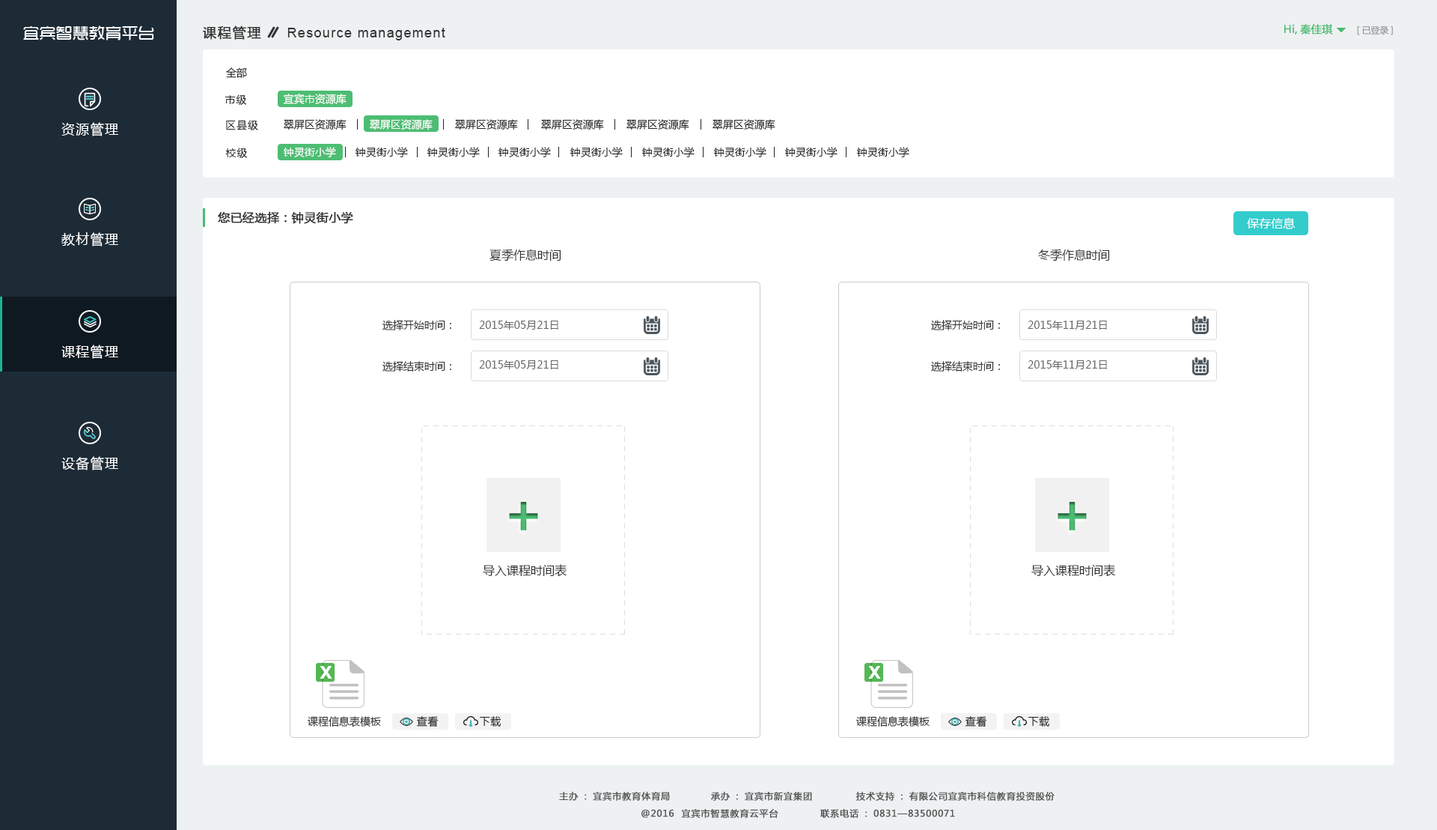
<style>
.page{position:relative;width:1437px;height:830px;background:#ffffff}
.page>*{position:absolute;margin:0}
.t1{font:16.5px "TRENDS";color:#ffffff}
.t2{font:13.5px "MicrosoftYaHei";letter-spacing:0.075em;color:#333333;font-weight:bold}
.t3{font:13.5px "ArialMT";letter-spacing:0.075em;color:#333333}
.t4{font:10.5px "MicrosoftYaHei";color:#4dbd73;font-weight:bold}
.t5{font:9px "MicrosoftYaHei";letter-spacing:-0.01em;color:#868686}
.t6{font:10.5px "MicrosoftYaHei";color:#222222}
.t7{font:10.5px "MicrosoftYaHei";letter-spacing:0.075em;color:#222222}
.t8{font:10.5px "MicrosoftYaHei";color:#ffffff}
.t9{font:13.5px "MicrosoftYaHei";letter-spacing:0.075em;color:#ffffff}
.t10{font:12px "MicrosoftYaHei";color:#333333;font-weight:bold}
.t11{font:12px "MicrosoftYaHei";color:#ffffff}
.t12{font:12px "MicrosoftYaHei";color:#333333}
.t13{font:10.5px "MicrosoftYaHei";color:#333333}
.t14{font:10.5px "MicrosoftYaHei";color:#666666}
.t15{font:10.5px "MicrosoftYaHei";letter-spacing:0.05em;color:#222222}
.t16{font:9px "MicrosoftYaHei";letter-spacing:0.05em;color:#545454;font-weight:bold}
</style>
<div class="page">
<p class="t1" style="left:23px;top:25px;width:131px;height:15px">宜宾智慧教育平台</p>
<p class="t2" style="left:203px;top:25px;width:58px;height:15px">课程管理</p>
<p class="t3" style="left:287px;top:28px;width:158px;height:12px">Resource management</p>
<p class="t4" style="left:1285px;top:24px;width:48px;height:10px">Hi,秦佳琪</p>
<p class="t5" style="left:1357px;top:25px;width:36px;height:10px">[已登录]</p>
<p class="t6" style="left:226px;top:67px;width:21px;height:11px">全部</p>
<p class="t7" style="left:225px;top:94px;width:22px;height:11px">市级</p>
<p class="t8" style="left:283px;top:94px;width:64px;height:11px">宜宾市资源库</p>
<p class="t9" style="left:61px;top:122px;width:57px;height:14px">资源管理</p>
<p class="t7" style="left:226px;top:120px;width:32px;height:10px">区县级</p>
<p class="t6" style="left:284px;top:119px;width:63px;height:11px">翠屏区资源库</p>
<p class="t8" style="left:370px;top:119px;width:63px;height:11px">翠屏区资源库</p>
<p class="t6" style="left:455px;top:119px;width:63px;height:11px">翠屏区资源库</p>
<p class="t6" style="left:541px;top:119px;width:63px;height:11px">翠屏区资源库</p>
<p class="t6" style="left:627px;top:119px;width:63px;height:11px">翠屏区资源库</p>
<p class="t6" style="left:713px;top:119px;width:63px;height:11px">翠屏区资源库</p>
<p class="t7" style="left:225px;top:147px;width:23px;height:11px">校级</p>
<p class="t8" style="left:283px;top:147px;width:53px;height:10px">钟灵街小学</p>
<p class="t6" style="left:355px;top:147px;width:53px;height:10px">钟灵街小学</p>
<p class="t6" style="left:427px;top:147px;width:53px;height:10px">钟灵街小学</p>
<p class="t6" style="left:498px;top:147px;width:53px;height:10px">钟灵街小学</p>
<p class="t6" style="left:570px;top:147px;width:53px;height:10px">钟灵街小学</p>
<p class="t6" style="left:642px;top:147px;width:53px;height:10px">钟灵街小学</p>
<p class="t6" style="left:713px;top:147px;width:54px;height:10px">钟灵街小学</p>
<p class="t6" style="left:785px;top:147px;width:53px;height:10px">钟灵街小学</p>
<p class="t6" style="left:856px;top:147px;width:54px;height:10px">钟灵街小学</p>
<p class="t10" style="left:218px;top:211px;width:135px;height:13px">您已经选择：钟灵街小学</p>
<p class="t11" style="left:1247px;top:217px;width:49px;height:12px">保存信息</p>
<p class="t9" style="left:61px;top:232px;width:57px;height:14px">教材管理</p>
<p class="t12" style="left:490px;top:249px;width:72px;height:12px">夏季作息时间</p>
<p class="t12" style="left:1038px;top:249px;width:72px;height:12px">冬季作息时间</p>
<p class="t13" style="left:383px;top:320px;width:68px;height:10px">选择开始时间：</p>
<p class="t14" style="left:479px;top:320px;width:80px;height:9px">2015年05月21日</p>
<p class="t13" style="left:931px;top:320px;width:69px;height:10px">选择开始时间：</p>
<p class="t14" style="left:1028px;top:320px;width:79px;height:9px">2015年11月21日</p>
<p class="t9" style="left:61px;top:344px;width:57px;height:15px">课程管理</p>
<p class="t13" style="left:383px;top:361px;width:68px;height:10px">选择结束时间：</p>
<p class="t14" style="left:479px;top:360px;width:80px;height:9px">2015年05月21日</p>
<p class="t13" style="left:931px;top:361px;width:69px;height:10px">选择结束时间：</p>
<p class="t14" style="left:1028px;top:360px;width:79px;height:9px">2015年11月21日</p>
<p class="t9" style="left:61px;top:456px;width:57px;height:14px">设备管理</p>
<p class="t12" style="left:483px;top:564px;width:84px;height:12px">导入课程时间表</p>
<p class="t12" style="left:1032px;top:564px;width:84px;height:12px">导入课程时间表</p>
<p class="t13" style="left:308px;top:716px;width:73px;height:11px">课程信息表模板</p>
<p class="t15" style="left:417px;top:716px;width:22px;height:11px">查看</p>
<p class="t15" style="left:480px;top:716px;width:22px;height:10px">下载</p>
<p class="t13" style="left:856px;top:716px;width:74px;height:11px">课程信息表模板</p>
<p class="t15" style="left:966px;top:716px;width:22px;height:11px">查看</p>
<p class="t15" style="left:1029px;top:716px;width:21px;height:10px">下载</p>
<p class="t16" style="left:559px;top:791px;width:111px;height:9px">主办：宜宾市教育体育局</p>
<p class="t16" style="left:711px;top:791px;width:101px;height:9px">承办：宜宾市新宜集团</p>
<p class="t16" style="left:856px;top:791px;width:199px;height:9px">技术支持：有限公司宜宾市科信教育投资股份</p>
<p class="t16" style="left:642px;top:809px;width:137px;height:9px">@2016  宜宾市智慧教育云平台</p>
<p class="t16" style="left:821px;top:809px;width:134px;height:9px">联系电话：0831—83500071</p>
</div>
